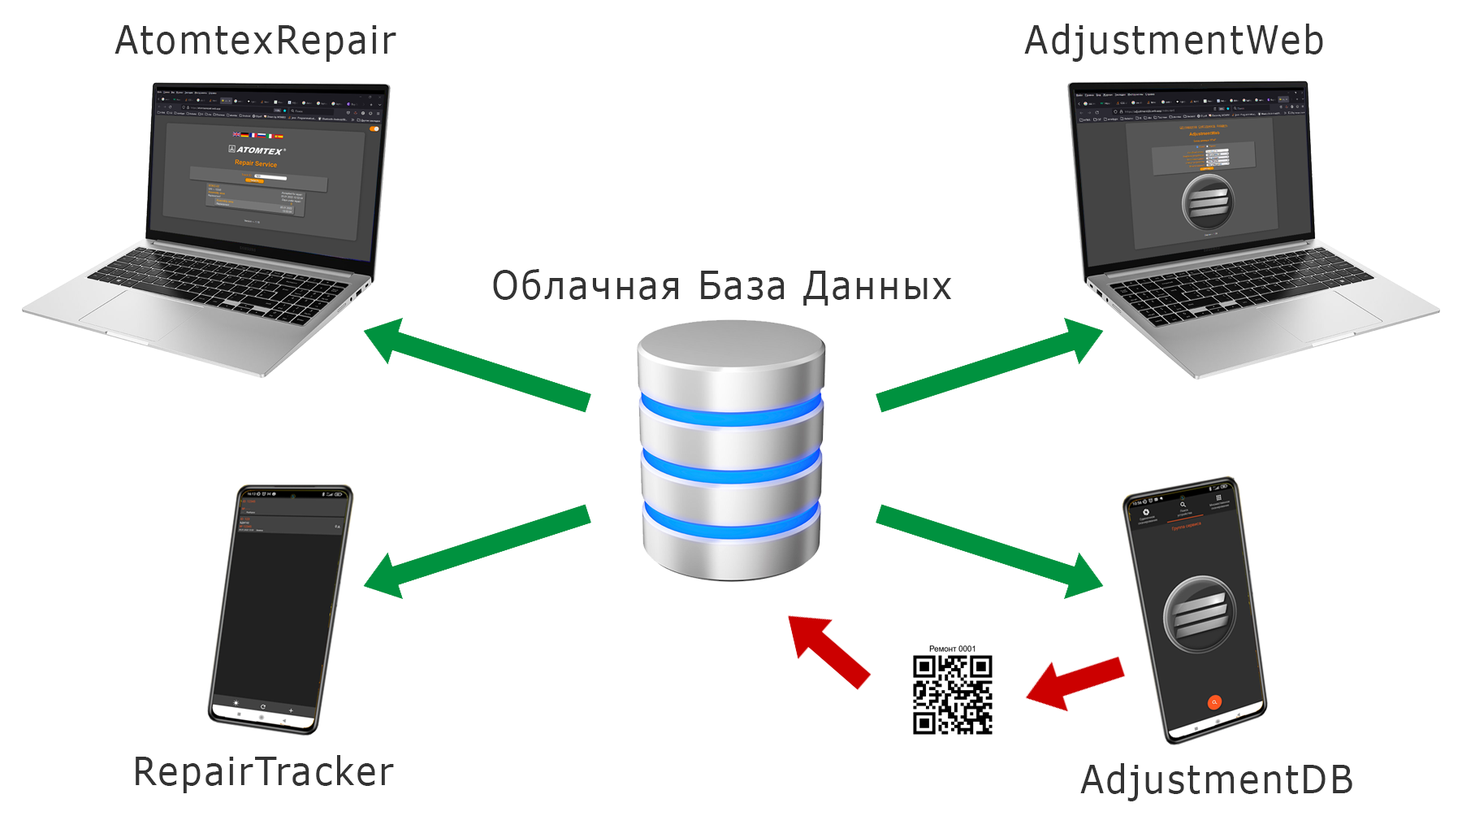
<style>
.page{position:relative;width:1462px;height:816px;background:#ffffff}
.page>*{position:absolute;margin:0}
.t1{font:39px "Verdana";letter-spacing:0.05em;color:#333333;scale:0.9 1}
</style>
<div class="page">
<p class="t1" style="left:115px;top:25px;width:281px;height:37px">AtomtexRepair</p>
<p class="t1" style="left:1024px;top:24px;width:299px;height:38px">AdjustmentWeb</p>
<p class="t1" style="left:493px;top:269px;width:459px;height:36px">Облачная База Данных</p>
<p class="t1" style="left:136px;top:755px;width:258px;height:38px">RepairTracker</p>
<p class="t1" style="left:1080px;top:763px;width:272px;height:38px">AdjustmentDB</p>
</div>
